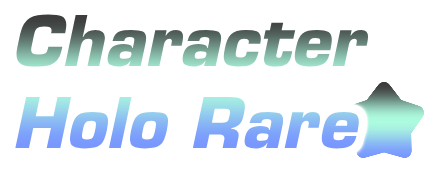
<style>
.page{position:relative;width:436px;height:169px;background:#ffffff}
.page>*{position:absolute;margin:0}
.t1{font:68px "Eurostile-BoldOblique"}
</style>
<div class="page">
<p class="t1" style="left:15px;top:14px;width:354px;height:135px">Character<br>Holo Rare</p>
</div>
